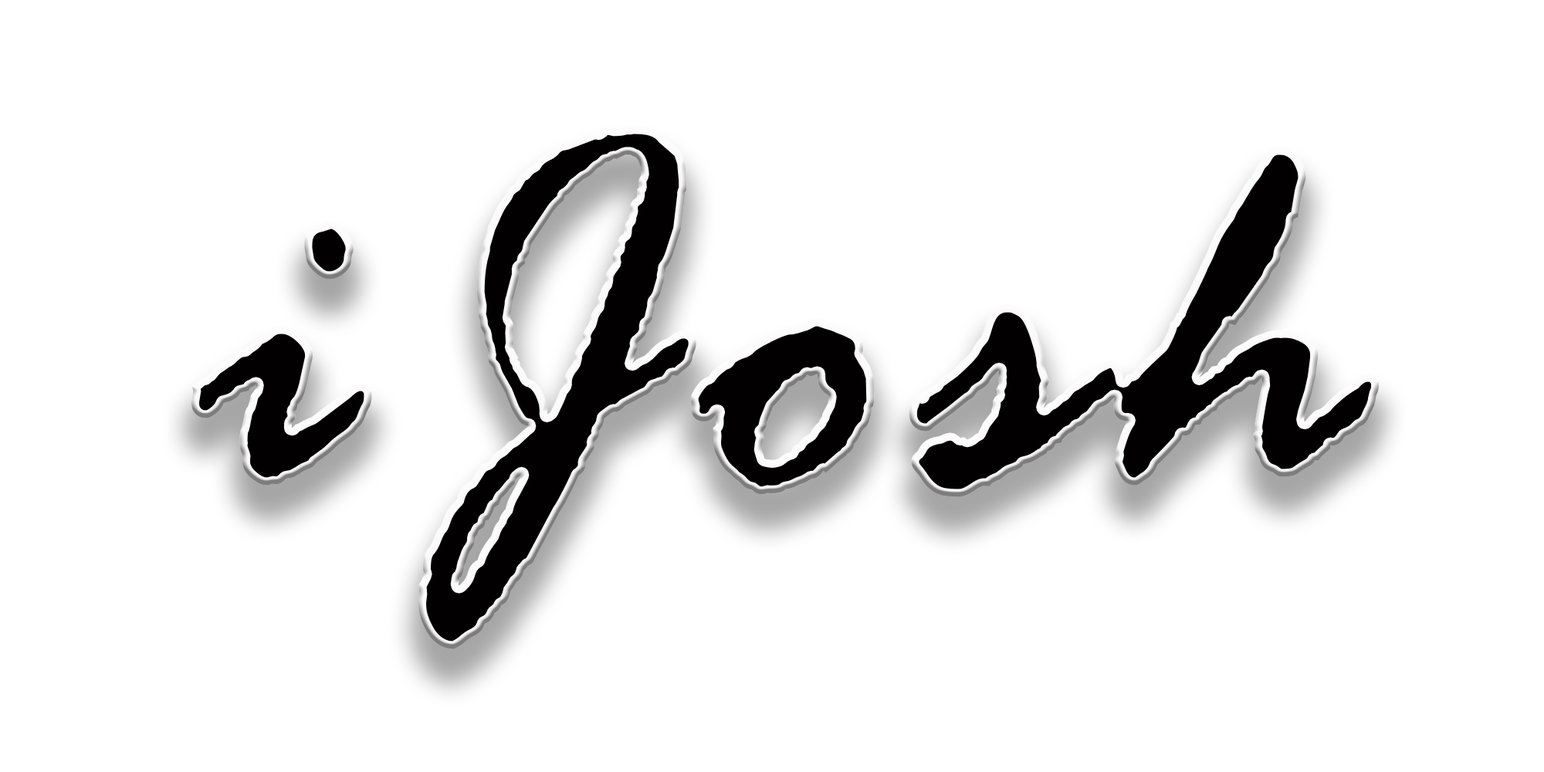
<style>
.page{position:relative;width:1544px;height:772px;background:#ffffff}
.page>*{position:absolute;margin:0}
.t1{font:536.2px "RageItalic";letter-spacing:0.05em;color:#020000;font-weight:bold}
</style>
<div class="page">
<p class="t1" style="left:191px;top:126px;width:1189px;height:523px">iJosh</p>
</div>
